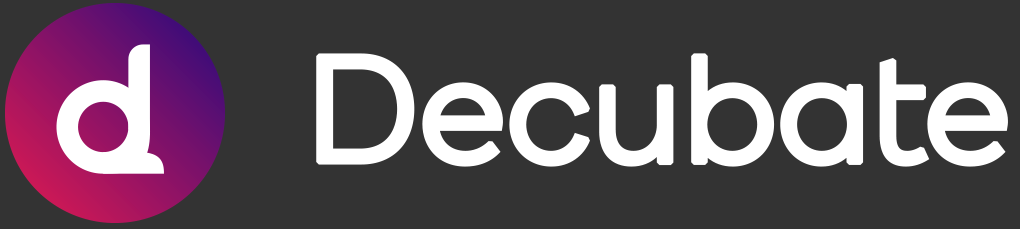
<style>
.page{position:relative;width:1020px;height:229px;background:#333333}
.page>*{position:absolute;margin:0}
.t1{font:151px "CardiumA-Regular";letter-spacing:-0.05em;color:#ffffff;font-weight:bold}
</style>
<div class="page">
<p class="t1" style="left:316px;top:53px;width:692px;height:114px">Decubate</p>
</div>
